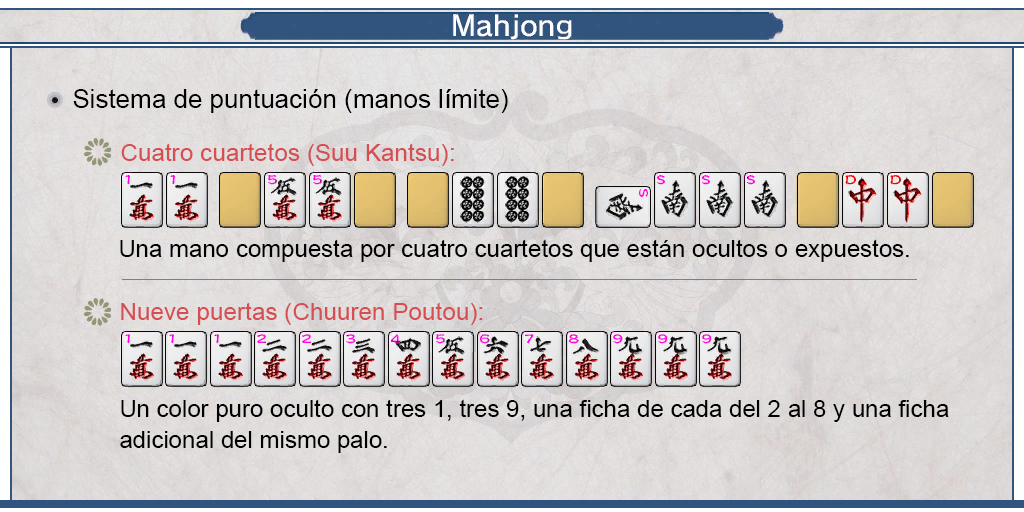
<style>
.page{position:relative;width:1024px;height:512px}
.page>*{position:absolute;margin:0}
.t1{font:26px "ArialMT";color:#000000}
.t2{font:24px "ArialMT";color:#d64d52}
.t3{font:24px "ArialMT";color:#000000}
.t4{font:24px/31px "ArialMT";color:#000000}
</style>
<div class="page">
<p class="t1" style="left:73px;top:89px;width:435px;height:24px">Sistema de puntuación (manos límite)</p>
<p class="t2" style="left:121px;top:143px;width:333px;height:23px">Cuatro cuartetos (Suu Kantsu):</p>
<p class="t3" style="left:120px;top:239px;width:789px;height:23px">Una mano compuesta por cuatro cuartetos que están ocultos o expuestos.</p>
<p class="t2" style="left:121px;top:302px;width:362px;height:23px">Nueve puertas (Chuuren Poutou):</p>
<p class="t4" style="left:120px;top:399px;width:829px;height:54px;text-align:justify">Un color puro oculto con tres 1, tres 9, una ficha de cada del 2 al 8 y una ficha <br>adicional del mismo palo.</p>
</div>
